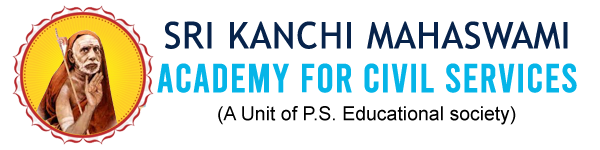
<style>
.page{position:relative;width:600px;height:150px;background:#ffffff}
.page>*{position:absolute;margin:0}
.t1{font:36.5px "TrebuchetMS";color:#07234b;font-weight:bold}
.t2{font:40.5px "Bebas-Regular";color:#05b5e8;font-weight:bold}
.t3{font:19.5px "ArialMT";color:#000101}
</style>
<div class="page">
<p class="t1" style="left:165px;top:21px;width:403px;height:28px">SRI KANCHI MAHASWAMI</p>
<p class="t2" style="left:157px;top:63px;width:420px;height:30px">ACADEMY FOR CIVIL SERVICES</p>
<p class="t3" style="left:218px;top:106px;width:298px;height:19px">(A Unit of P.S. Educational society)</p>
</div>
